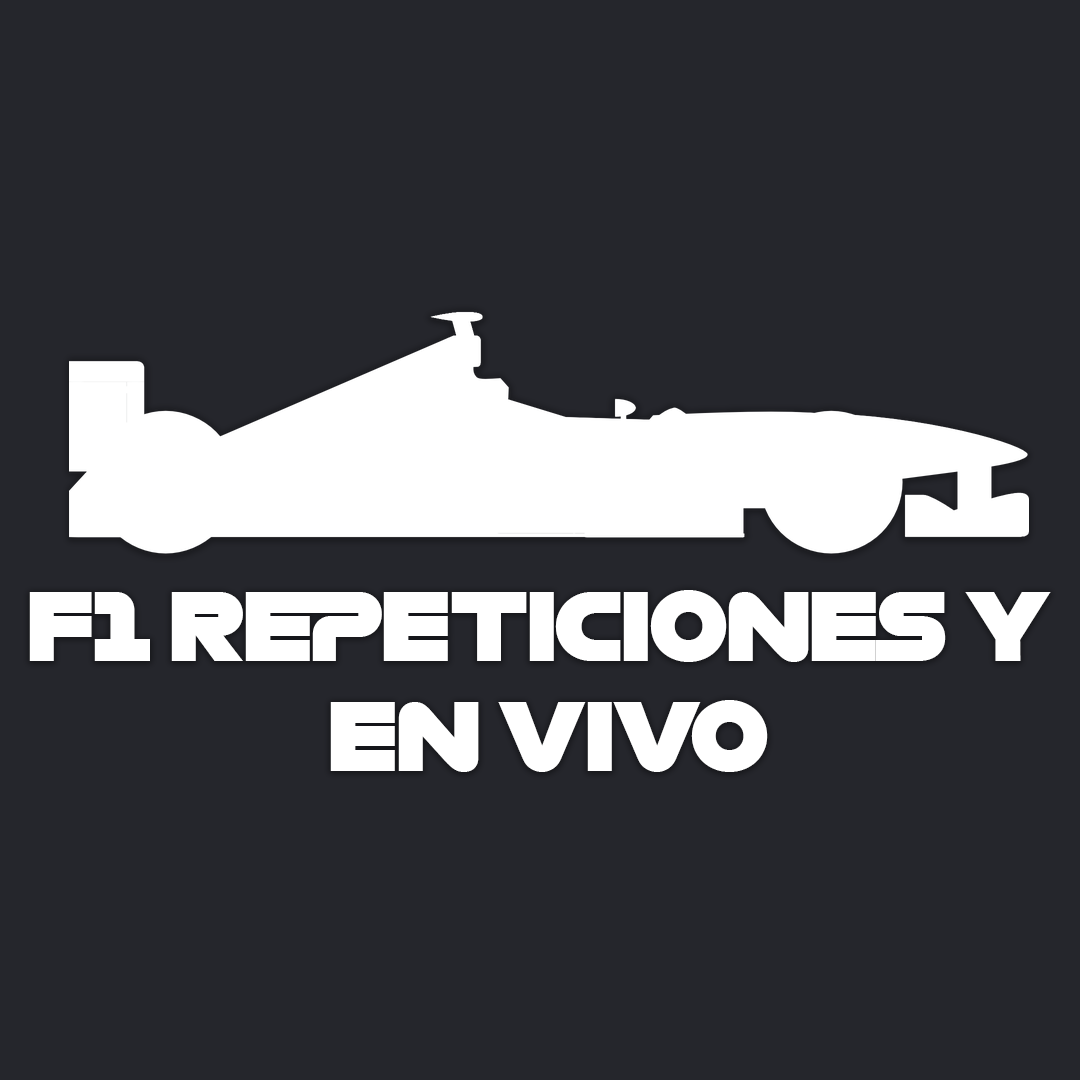
<style>
.page{position:relative;width:1080px;height:1080px;background:#25262c}
.page>*{position:absolute;margin:0}
.t1{font:92px "Formula1-Display-Black";color:#ffffff}
</style>
<div class="page">
<p class="t1" style="left:29px;top:590px;width:1022px;height:182px;text-align:center">F1 REPETICIONES Y <br>EN VIVO</p>
</div>
